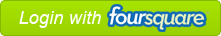
<style>
.page{position:relative;width:221px;height:36px}
.page>*{position:absolute;margin:0}
.t1{font:18px "Arial-ItalicMT";letter-spacing:0.01em;color:#fefefe}
</style>
<div class="page">
<p class="t1" style="left:19px;top:11px;width:82px;height:17px">Login with</p>
</div>
